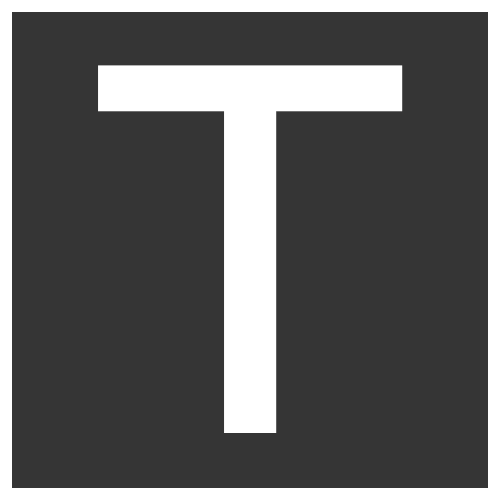
<style>
.page{position:relative;width:500px;height:500px;background:#353535}
.page>*{position:absolute;margin:0}
.t1{font:525px "MontserratRoman-Medium";letter-spacing:0.04em;color:#ffffff}
</style>
<div class="page">
<p class="t1" style="left:98px;top:65px;width:305px;height:368px">T</p>
</div>
